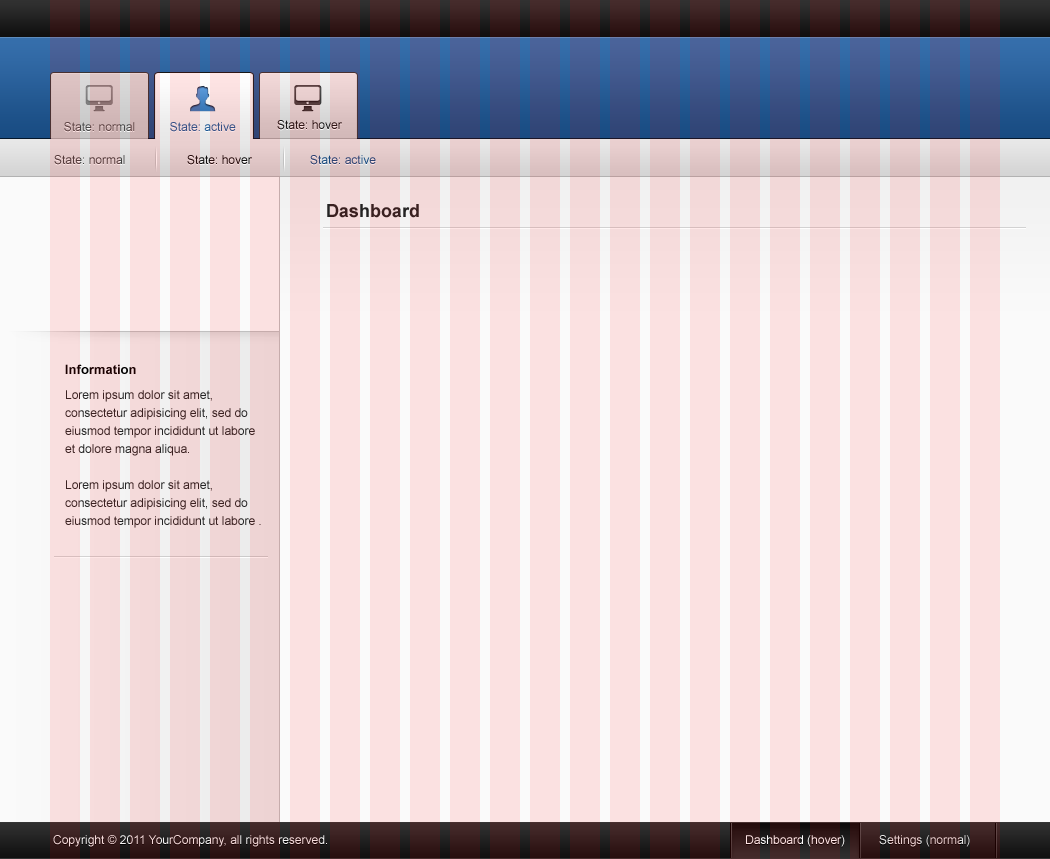
<style>
.page{position:relative;width:1050px;height:859px;background:#fbe1e1}
.page>*{position:absolute;margin:0}
.t1{font:12px "ArialMT";color:#4a4a4a}
.t2{font:12px "ArialMT";color:#205a94}
.t3{font:12px "ArialMT";color:#191919}
.t4{font:12px "ArialMT";color:#424242}
.t5{font:12px "ArialMT";color:#101010}
.t6{font:12px "ArialMT";color:#164a7e}
.t7{font:18px "Arial-BoldMT";color:#242424}
.t8{font:13px "Arial-BoldMT";color:#1a0000}
.t9{font:12px/18px "ArialMT";color:#262626}
.t10{font:12px "ArialMT";color:#f5dbdb}
.t11{font:12px "ArialMT"}
.t12{font:12px "ArialMT";color:#e6e6e6}
</style>
<div class="page">
<p class="t1" style="left:64px;top:122px;width:71px;height:10px">State: normal</p>
<p class="t2" style="left:170px;top:122px;width:66px;height:10px">State: active</p>
<p class="t3" style="left:277px;top:120px;width:65px;height:10px">State: hover</p>
<p class="t4" style="left:54px;top:155px;width:71px;height:10px">State: normal</p>
<p class="t5" style="left:187px;top:155px;width:65px;height:10px">State: hover</p>
<p class="t6" style="left:310px;top:155px;width:66px;height:10px">State: active</p>
<p class="t7" style="left:327px;top:204px;width:92px;height:14px">Dashboard</p>
<p class="t8" style="left:65px;top:364px;width:71px;height:10px">Information</p>
<p class="t9" style="left:65px;top:390px;width:196px;height:138px">Lorem ipsum dolor sit amet, <br>consectetur adipisicing elit, sed do<br>eiusmod tempor incididunt ut labore<br>et dolore magna aliqua.<br><br>Lorem ipsum dolor sit amet,<br>consectetur adipisicing elit, sed do<br>eiusmod tempor incididunt ut labore .</p>
<p class="t10" style="left:53px;top:835px;width:274px;height:12px">Copyright © 2011 YourCompany, all rights reserved.</p>
<p class="t11" style="left:746px;top:835px;width:99px;height:12px">Dashboard (hover)</p>
<p class="t12" style="left:879px;top:835px;width:91px;height:12px">Settings (normal)</p>
</div>
